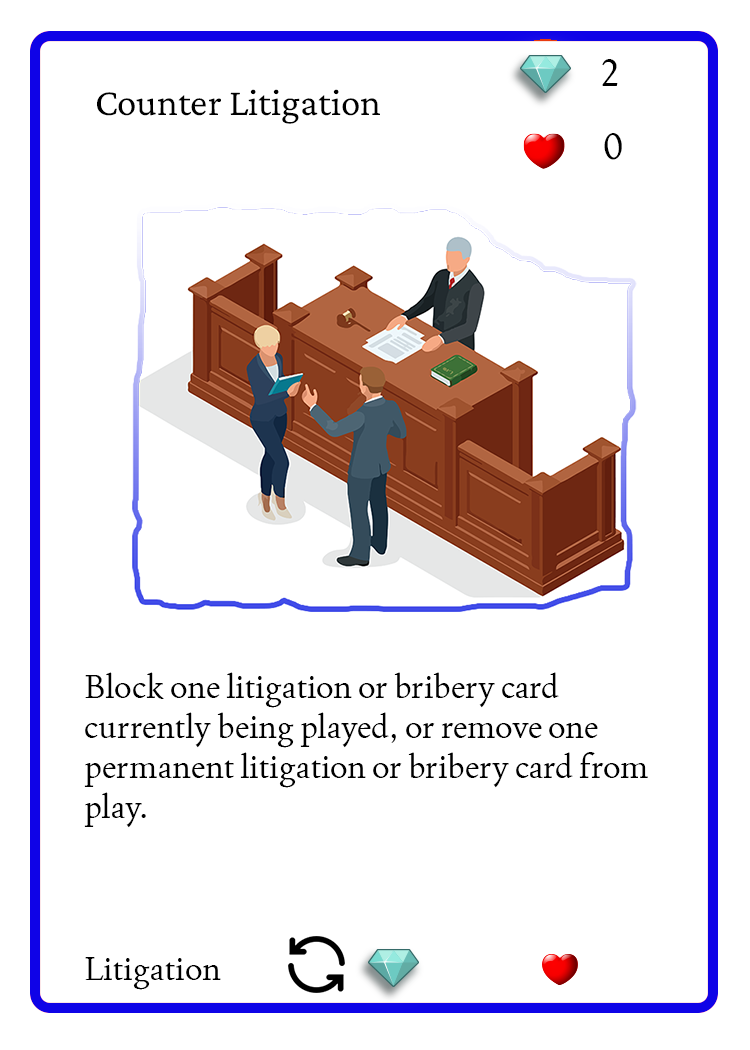
<style>
.page{position:relative;width:750px;height:1050px;background:#ffffff}
.page>*{position:absolute;margin:0}
.t1{font:37.5px "Joan-Regular";color:#000000;text-transform:uppercase}
.t2{font:38.9px "CrimsonPro-Regular";color:#000000}
.t3{font:33.3px "Joan-Regular";color:#000000}
</style>
<div class="page">
<p class="t1" style="left:602px;top:59px;width:16px;height:27px">2</p>
<p class="t2" style="left:97px;top:89px;width:283px;height:35px">Counter Litigation</p>
<p class="t1" style="left:604px;top:133px;width:18px;height:27px">0</p>
<p class="t3" style="left:84px;top:672px;width:564px;height:156px">Block one litigation or bribery card currently being played, or remove one permanent litigation or bribery card from play.</p>
<p class="t3" style="left:85px;top:957px;width:136px;height:33px">Litigation</p>
</div>
